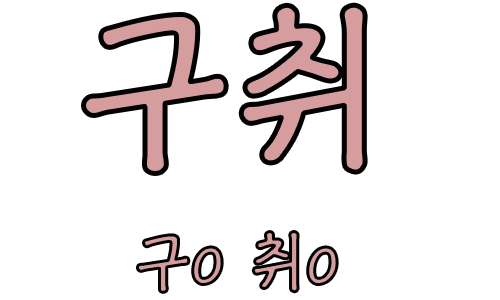
<style>
.page{position:relative;width:500px;height:300px;background:#ffffff}
.page>*{position:absolute;margin:0}
.t1{font:180px "KoreanCNM-B";color:#d59d9d}
.t2{font:65px "KoreanCNM-B"}
</style>
<div class="page">
<p class="t1" style="left:83px;top:5px;width:283px;height:169px">구취</p>
<p class="t2" style="left:137px;top:231px;width:201px;height:62px">구o 취o</p>
</div>
